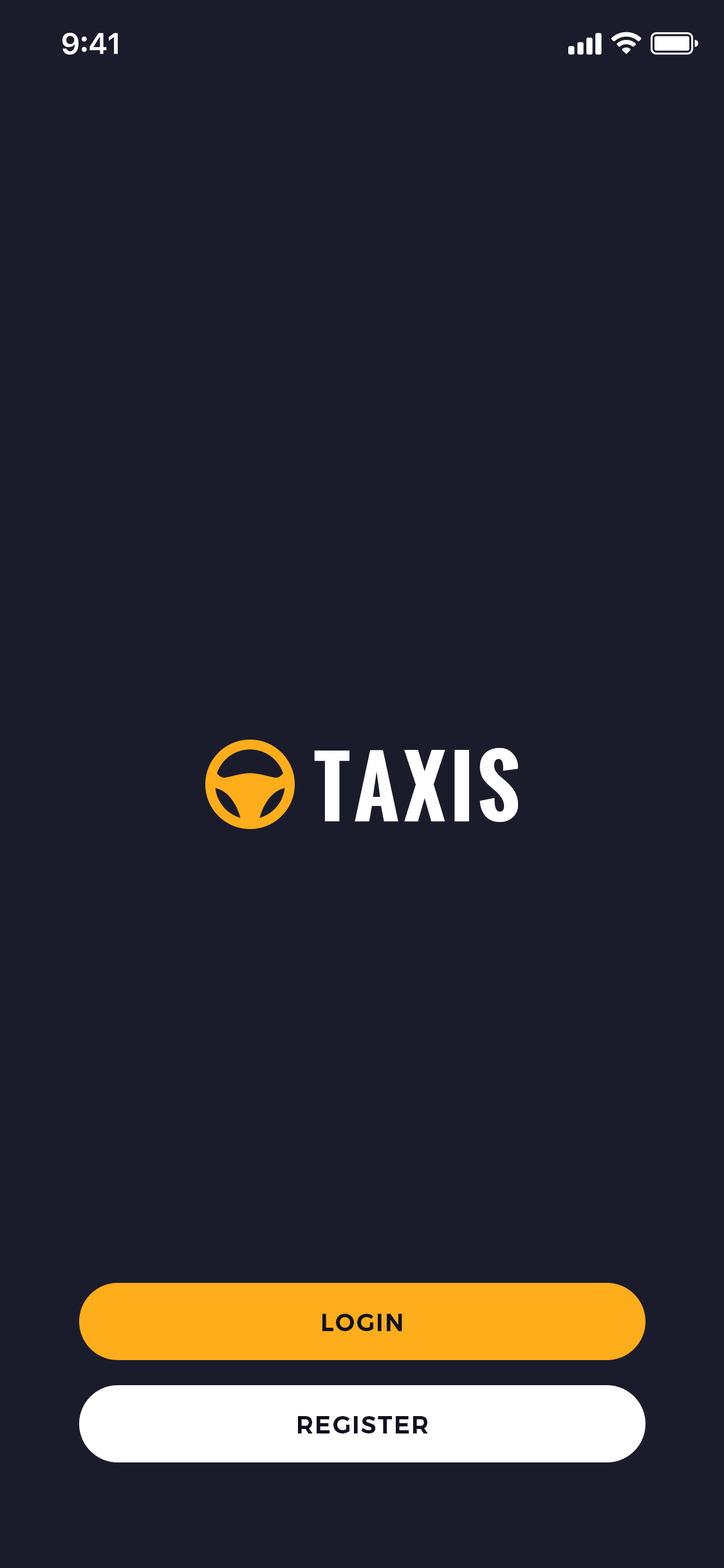
<style>
.page{position:relative;width:724px;height:1568px;background:#1a1c2b}
.page>*{position:absolute;margin:0}
.t1{font:80.5px "Oswald-Bold";letter-spacing:0.06em;color:#ffffff;text-transform:uppercase}
.t2{font:24.1px "Montserrat-SemiBold";letter-spacing:0.06em;color:#0e1020}
</style>
<div class="page">
<p class="t1" style="left:314px;top:748px;width:204px;height:74px">TAXIS</p>
<p class="t2" style="left:322px;top:1314px;width:80px;height:17px">LOGIN</p>
<p class="t2" style="left:298px;top:1416px;width:130px;height:17px">REGISTER</p>
</div>
